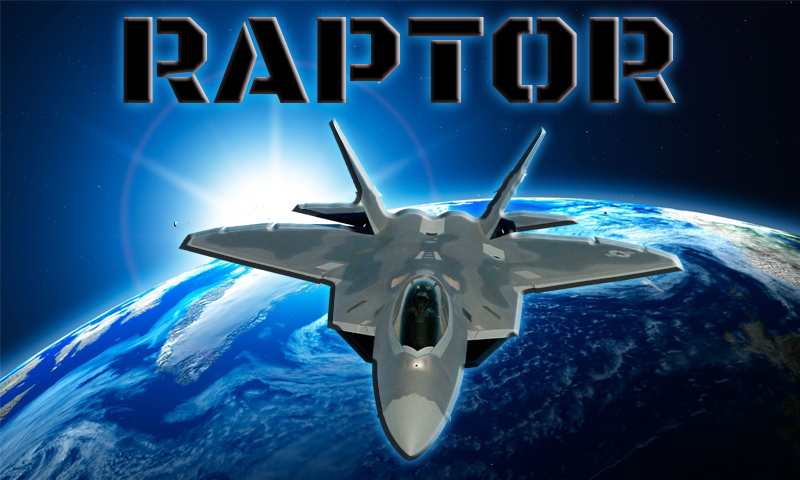
<style>
.page{position:relative;width:800px;height:480px}
.page>*{position:absolute;margin:0}
.t1{font:133.3px "BlackOpsOne-Regular";color:#000000}
</style>
<div class="page">
<p class="t1" style="left:123px;top:17px;width:553px;height:86px">RAPTOR</p>
<p class="t1" style="left:123px;top:17px;width:553px;height:86px">RAPTOR</p>
</div>
